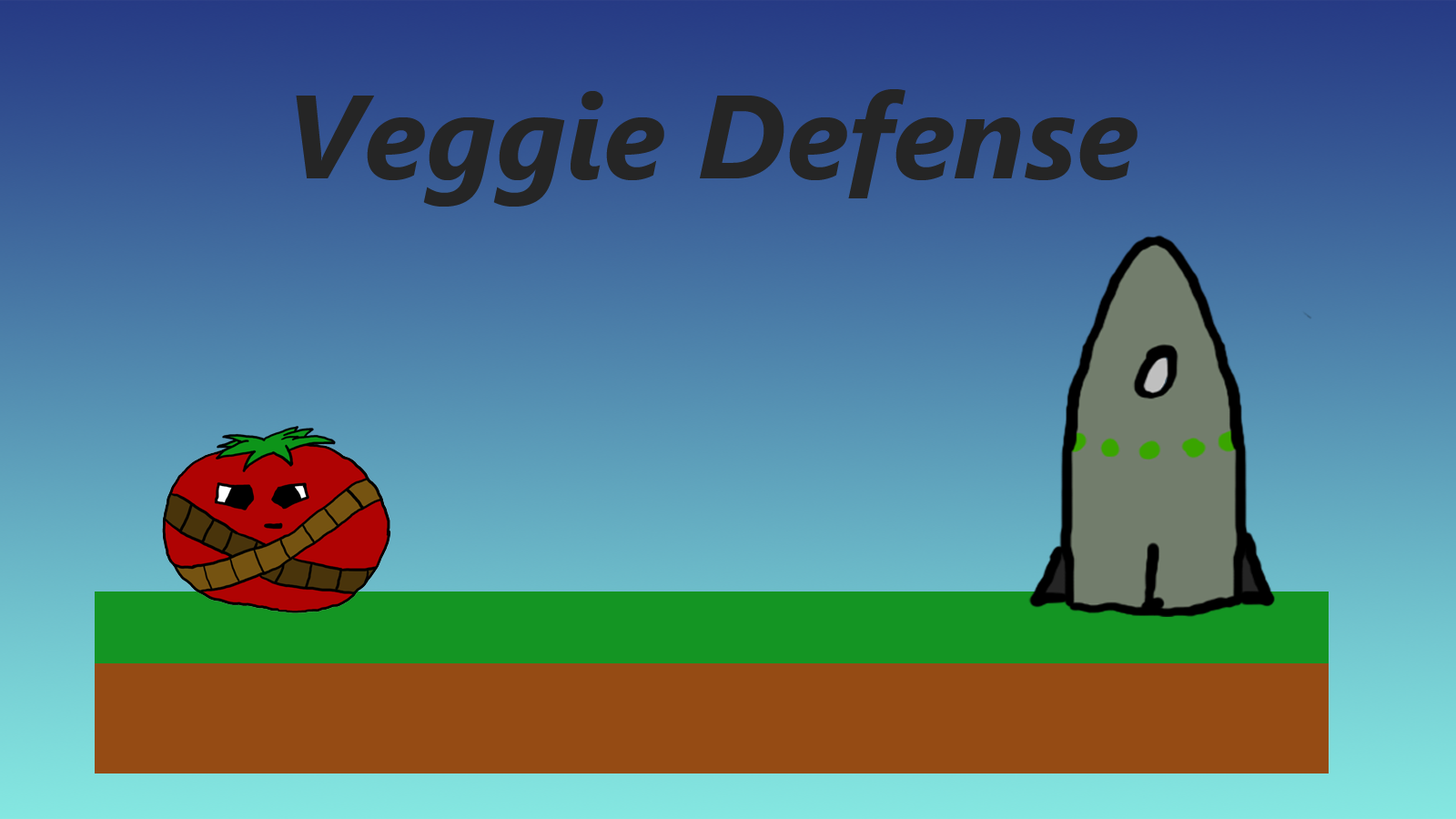
<style>
.page{position:relative;width:1456px;height:819px}
.page>*{position:absolute;margin:0}
.t1{font:118.3px "SegoeUI-BoldItalic";color:#252525}
</style>
<div class="page">
<p class="t1" style="left:296px;top:89px;width:841px;height:118px">Veggie Defense</p>
</div>
